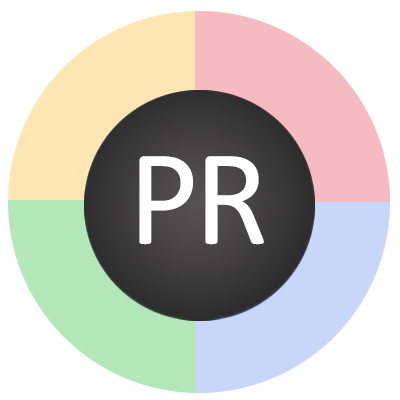
<style>
.page{position:relative;width:400px;height:400px;background:#ffffff}
.page>*{position:absolute;margin:0}
.t1{font:138px "Calibri";letter-spacing:-0.035em;color:#ffffff}
</style>
<div class="page">
<p class="t1" style="left:139px;top:156px;width:125px;height:89px">PR</p>
</div>
